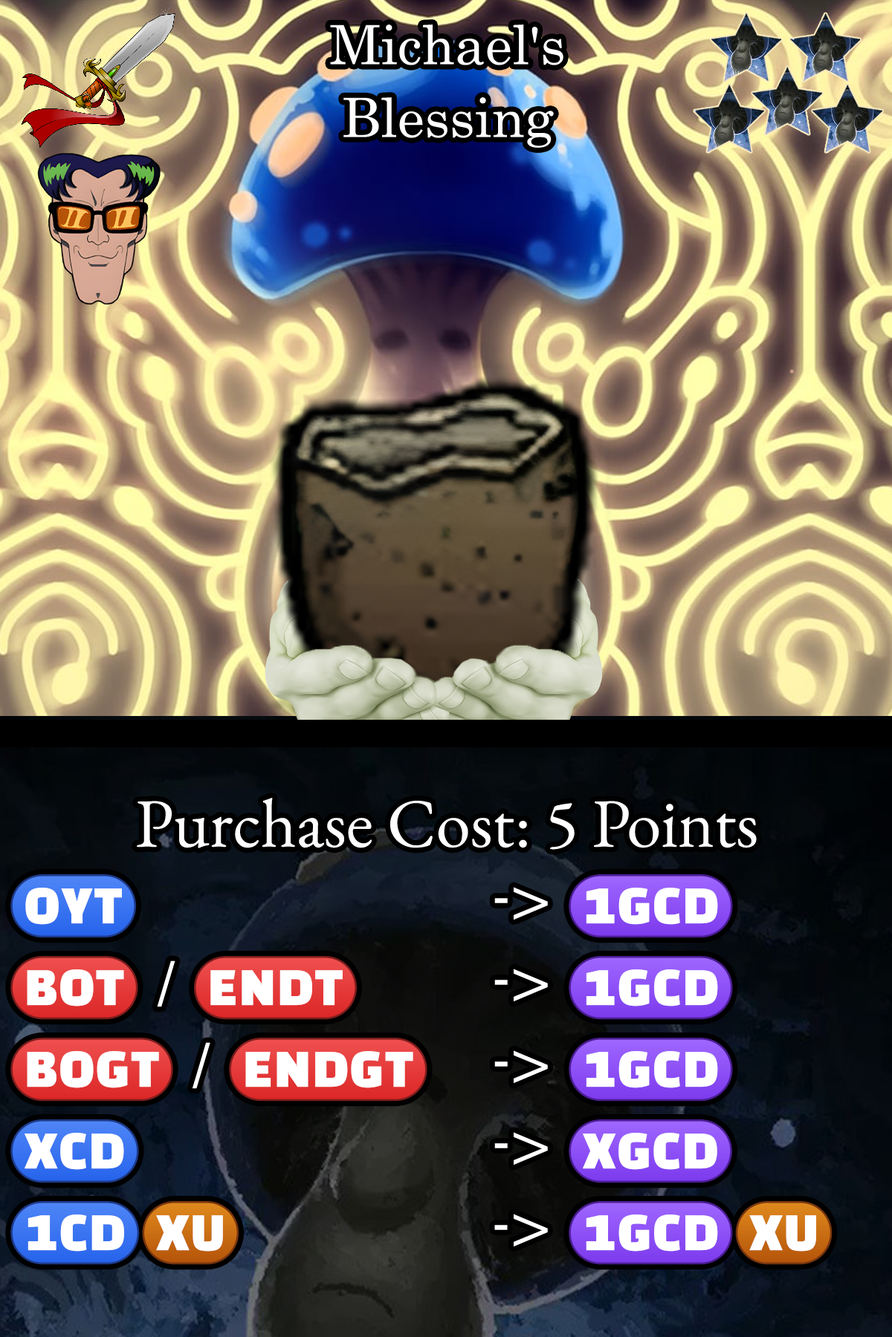
<style>
.page{position:relative;width:892px;height:1337px}
.page>*{position:absolute;margin:0}
.t1{font:92.9px/72.8px "Century";color:#ffffff}
.t2{font:118.4px/49.8px "EBGaramond-Regular"}
.t3{font:110.7px/81.7px "stoogedings-Regular"}
.t4{font:107.9px/81.7px "Century"}
.t5{font:110.7px/81.7px "stoogedings-Regular";letter-spacing:0.278em}
.t6{font:107.9px/81.7px "Century";letter-spacing:0.278em}
</style>
<div class="page">
<p class="t1" style="left:330px;top:25px;width:233px;height:123px;text-align:center">Michael's<br>Blessing</p>
<p class="t2" style="left:10px;top:798px;width:822px;height:467px;text-align:center">Purchase Cost: 5 Points<br><span class="t3">(OYT)</span><span class="t4">      -&gt; </span><span class="t3">(1GCD)<br></span><span class="t5">(BOT)</span><span class="t6">/</span><span class="t3">(ENDT)</span><span class="t4">   -&gt; </span><span class="t3">(1GCD)<br></span><span class="t5">(BOGT)</span><span class="t6">/</span><span class="t3">(ENDGT)</span><span class="t4">  -&gt; </span><span class="t3">(1GCD)<br>(XCD)</span><span class="t4">              -&gt; </span><span class="t3">(XGCD)<br>(1CD)(XU)       </span><span class="t4">-&gt; </span><span class="t3">(1GCD)(XU)</span></p>
</div>
